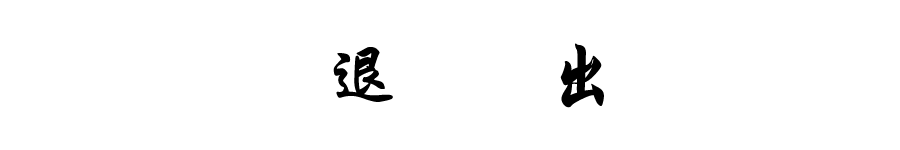
<style>
.page{position:relative;width:900px;height:150px;background:#ffffff}
.page>*{position:absolute;margin:0}
.t1{font:74.1px "STXingkai";color:#000000}
</style>
<div class="page">
<p class="t1" style="left:333px;top:43px;width:271px;height:65px">退        出</p>
</div>
